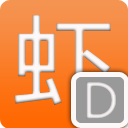
<style>
.page{position:relative;width:128px;height:128px}
.page>*{position:absolute;margin:0}
.t1{font:99px "MicrosoftYaHei";letter-spacing:0.1em;color:#fcf8f8}
.t2{font:48px "MicrosoftYaHei";letter-spacing:0.1em;color:#e7e4e4}
</style>
<div class="page">
<p class="t1" style="left:14px;top:15px;width:97px;height:95px">虾</p>
<p class="t2" style="left:86px;top:82px;width:31px;height:37px">D</p>
</div>
